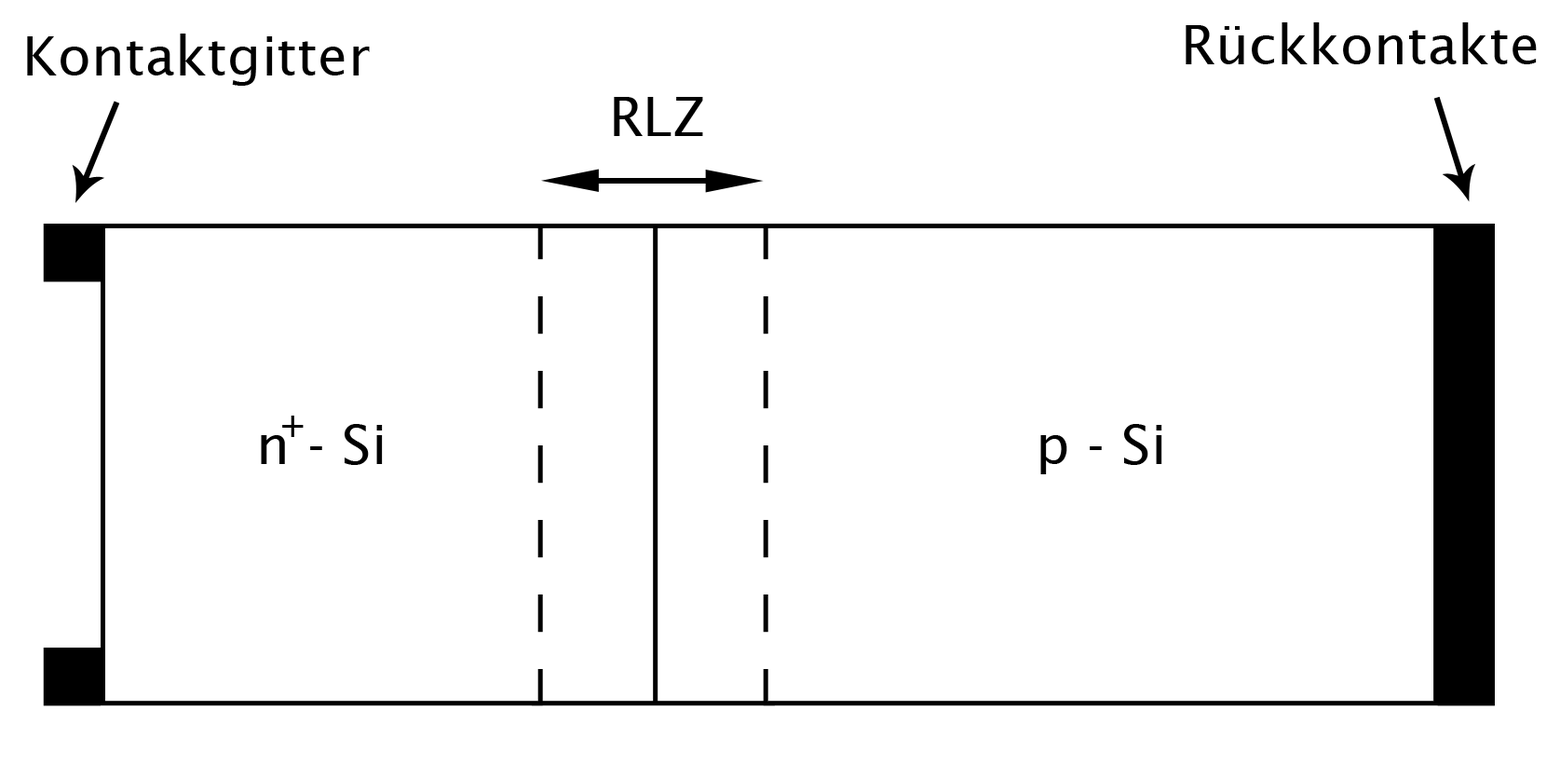
<style>
.page{position:relative;width:1560px;height:765px;background:#ffffff}
.page>*{position:absolute;margin:0}
.t1{font:54.3px "LucidaSans";color:#000000}
.t2{font:38.8px "LucidaSans";color:#000000}
</style>
<div class="page">
<p class="t1" style="left:1185px;top:22px;width:351px;height:42px">Rückkontakte</p>
<p class="t1" style="left:27px;top:34px;width:343px;height:52px">Kontaktgitter</p>
<p class="t1" style="left:614px;top:97px;width:89px;height:39px">RLZ</p>
<p class="t1" style="left:261px;top:424px;width:122px;height:41px">n - Si</p>
<p class="t2" style="left:282px;top:415px;width:22px;height:22px">+</p>
<p class="t1" style="left:1040px;top:424px;width:122px;height:50px">p - Si</p>
</div>
